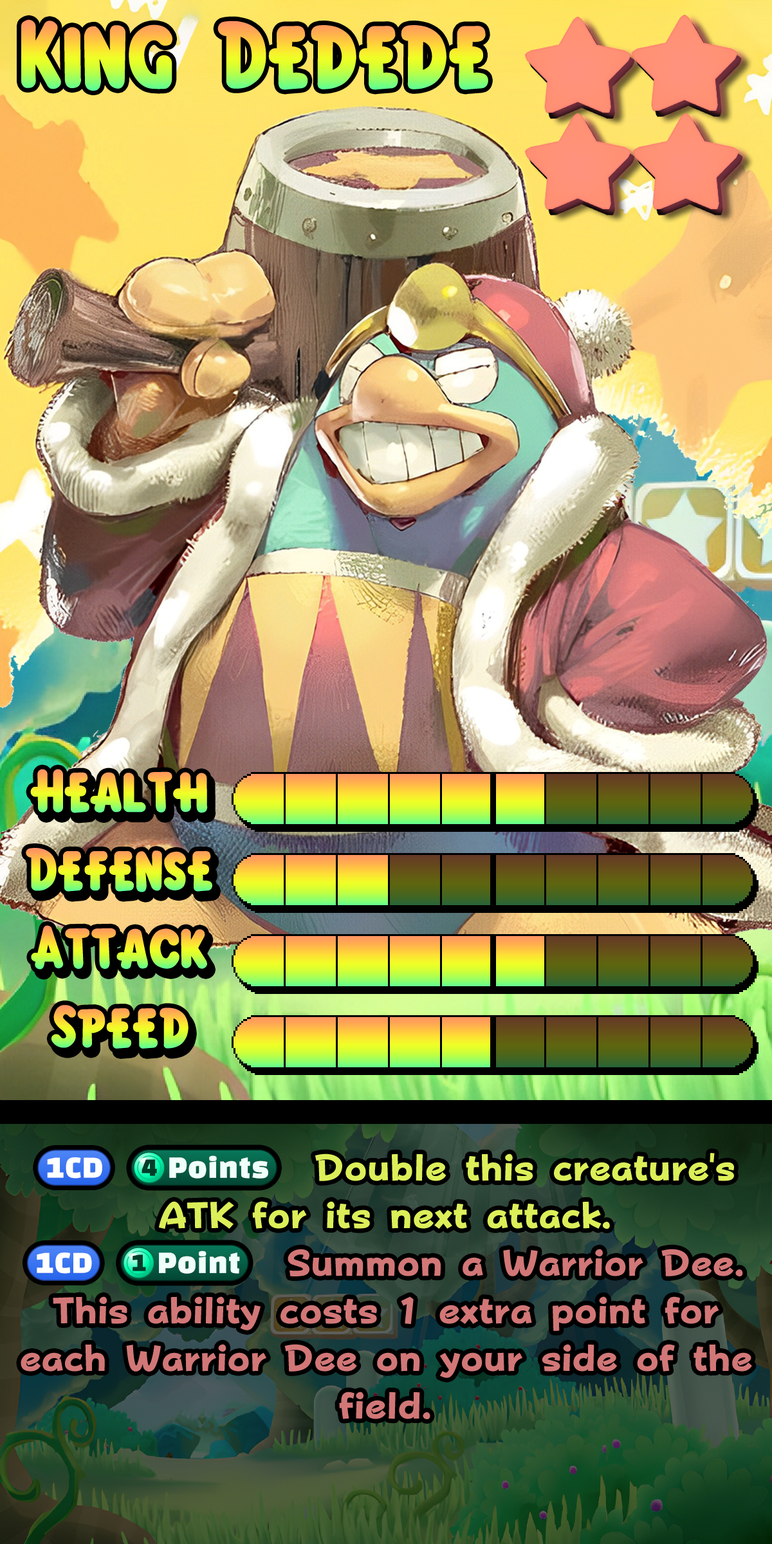
<style>
.page{position:relative;width:772px;height:1544px}
.page>*{position:absolute;margin:0}
.t1{font:146.7px "KirbyClassic"}
.t2{font:92.7px "KirbyClassic"}
.t3{font:63.1px/47.6px "FOTPopHappinessStrp-ExtraBold";color:#d27777}
.t4{font:63.1px/47.6px "stoogedings-Regular";letter-spacing:0.5em;color:#dcef59}
.t5{font:64.3px/47.6px "stoogedings-Regular";letter-spacing:0.5em;color:#dcef59}
.t6{font:63.1px/47.6px "FOTPopHappinessStrp-ExtraBold";color:#dcef59}
.t7{font:63.1px/47.6px "stoogedings-Regular";letter-spacing:0.5em;color:#d27777}
.t8{font:64.3px/47.6px "stoogedings-Regular";letter-spacing:0.5em;color:#d27777}
</style>
<div class="page">
<p class="t1" style="left:21px;top:19px;width:467px;height:72px">King Dedede</p>
<p class="t2" style="left:30px;top:769px;width:178px;height:44px">Health</p>
<p class="t2" style="left:26px;top:848px;width:186px;height:44px">Defense</p>
<p class="t2" style="left:31px;top:925px;width:176px;height:45px">Attack</p>
<p class="t2" style="left:51px;top:1005px;width:138px;height:44px">Speed</p>
<p class="t3" style="left:21px;top:1149px;width:731px;height:270px;text-align:center"><span class="t4">(1CD)</span><span class="t5">(4 points)</span><span class="t6"> Double this creature's ATK for its next attack. <br></span><span class="t7">(1CD)</span><span class="t8">(1 point)</span> Summon a Warrior Dee. This ability costs 1 extra point for each Warrior Dee on your side of the field.</p>
</div>
